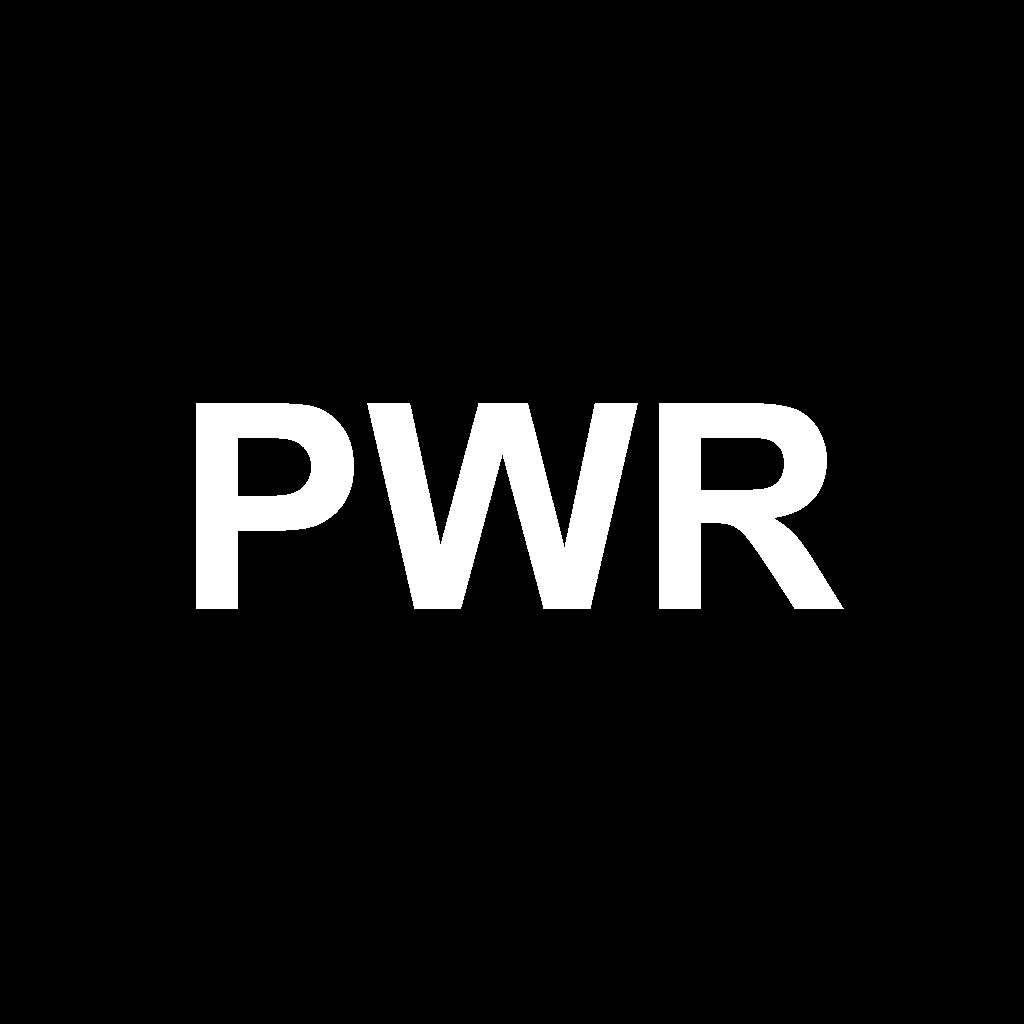
<style>
.page{position:relative;width:1024px;height:1024px;background:#000000}
.page>*{position:absolute;margin:0}
.t1{font:287.5px "Arial-BoldMT";color:#ffffff}
</style>
<div class="page">
<p class="t1" style="left:196px;top:403px;width:648px;height:206px">PWR</p>
</div>
